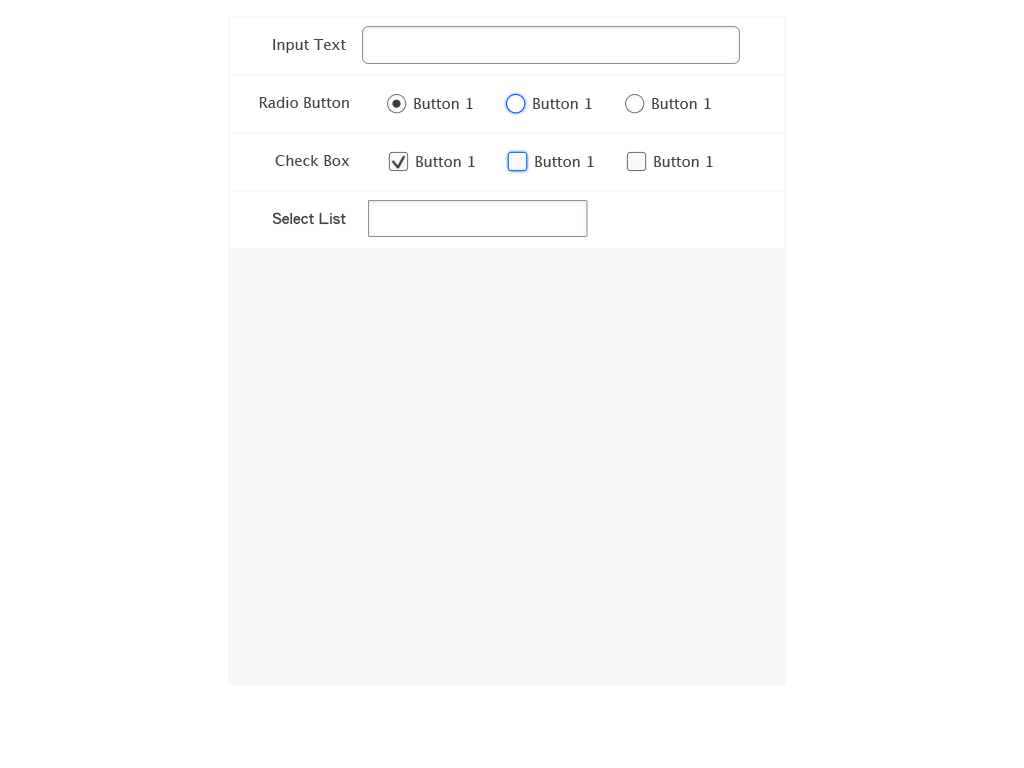
<style>
.page{position:relative;width:1024px;height:768px;background:#ffffff}
.page>*{position:absolute;margin:0}
.t1{font:15px "LucidaGrande";letter-spacing:-0.01em;color:#434343}
.t2{font:15px "LiHeiPro";letter-spacing:-0.01em;color:#434343}
</style>
<div class="page">
<p class="t1" style="left:273px;top:39px;width:73px;height:14px">Input Text</p>
<p class="t1" style="left:259px;top:97px;width:90px;height:11px">Radio Button</p>
<p class="t1" style="left:414px;top:98px;width:59px;height:11px">Button 1</p>
<p class="t1" style="left:533px;top:98px;width:59px;height:11px">Button 1</p>
<p class="t1" style="left:652px;top:98px;width:59px;height:11px">Button 1</p>
<p class="t1" style="left:275px;top:155px;width:75px;height:11px">Check Box</p>
<p class="t1" style="left:416px;top:156px;width:59px;height:11px">Button 1</p>
<p class="t1" style="left:535px;top:156px;width:59px;height:11px">Button 1</p>
<p class="t1" style="left:654px;top:156px;width:59px;height:11px">Button 1</p>
<p class="t2" style="left:272px;top:212px;width:74px;height:13px">Select List</p>
</div>
